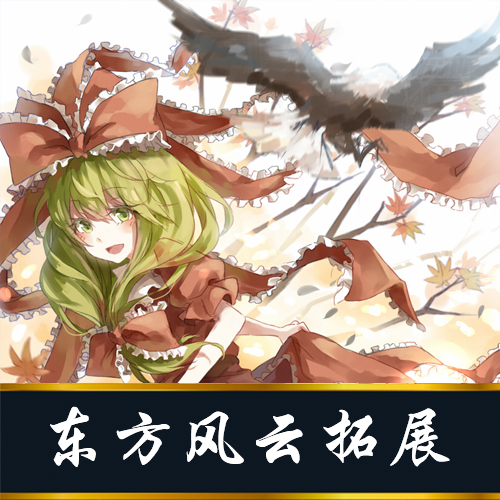
<style>
.page{position:relative;width:500px;height:500px}
.page>*{position:absolute;margin:0}
.t1{font:69px "STXingkai";color:#ffffff}
</style>
<div class="page">
<p class="t1" style="left:50px;top:406px;width:400px;height:61px">东方风云拓展</p>
</div>
